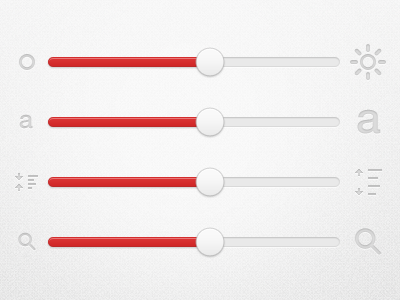
<style>
.page{position:relative;width:400px;height:300px}
.page>*{position:absolute;margin:0}
.t1{font:44px "HelveticaNeueLTPro-Md";color:#dbdbdb}
.t2{font:25px "HelveticaNeueLTPro-Md";color:#dbdbdb}
</style>
<div class="page">
<p class="t1" style="left:357px;top:109px;width:24px;height:25px">a</p>
<p class="t2" style="left:19px;top:114px;width:14px;height:15px">a</p>
</div>
